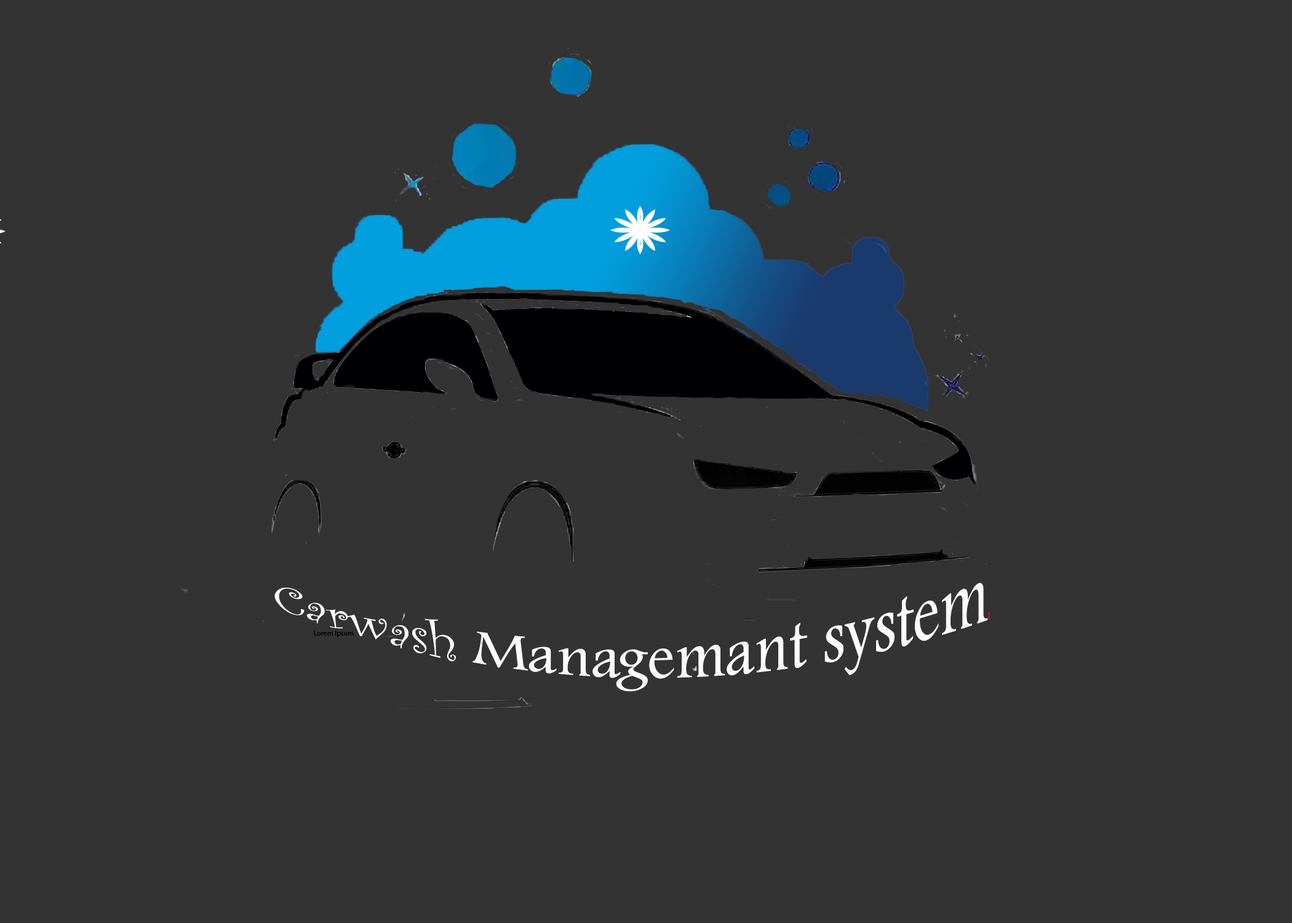
<style>
.page{position:relative;width:1292px;height:923px;background:#333333}
.page>*{position:absolute;margin:0}
.t1{font:61.5px "FootlightMTLight";color:#fcfafa}
.t2{font:61.5px "CurlzMT";color:#fcfafa}
.t3{font:7.4px "FootlightMTLight";color:#e70f0f}
.t4{font:7.4px "MyriadPro-Regular";color:#000000}
</style>
<div class="page">
<p class="t1" style="left:274px;top:583px;width:717px;height:109px"><span class="t2">Carwash</span> Managemant system<span class="t3">I</span></p>
<p class="t4" style="left:314px;top:630px;width:40px;height:7px">Lorem Ipsum</p>
</div>
